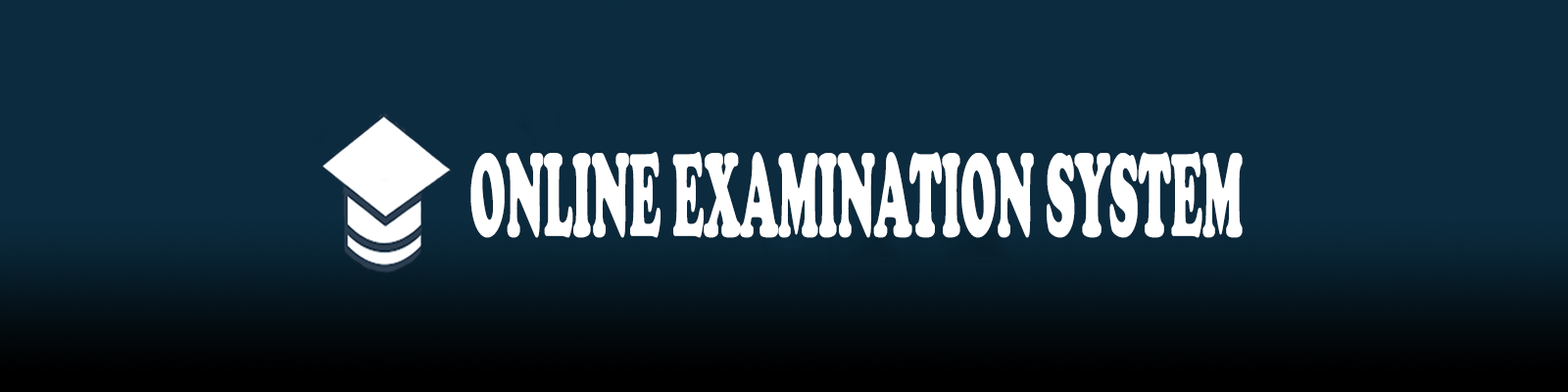
<style>
.page{position:relative;width:1568px;height:392px;background:#0c2b3f}
.page>*{position:absolute;margin:0}
.t1{font:122.5px "CooperBlack";color:#ffffff;scale:0.37 1}
</style>
<div class="page">
<p class="t1" style="left:470px;top:152px;width:773px;height:86px">ONLINE EXAMINATION SYSTEM</p>
</div>
